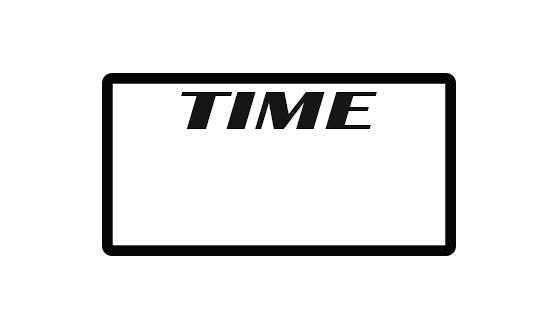
<style>
.page{position:relative;width:558px;height:322px;background:#ffffff}
.page>*{position:absolute;margin:0}
.t1{font:56.1px "BritannicBold";color:#161616;font-variant:small-caps;font-style:italic;scale:1.68 1}
</style>
<div class="page">
<p class="t1" style="left:181px;top:92px;width:196px;height:37px">TIME</p>
</div>
